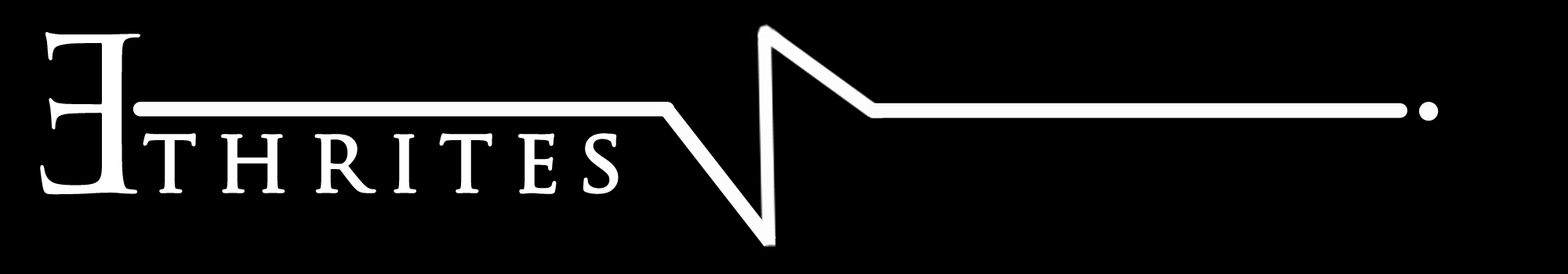
<style>
.page{position:relative;width:1568px;height:274px;background:#000000}
.page>*{position:absolute;margin:0}
.t1{font:248.3px "TrajanPro-Regular";letter-spacing:0.18em;color:#ffffff}
.t2{font:88.7px "TrajanPro-Regular";letter-spacing:0.18em;color:#ffffff;font-weight:bold}
</style>
<div class="page">
<p class="t1" style="left:40px;top:32px;width:100px;height:163px;rotate:180deg">e</p>
<p class="t2" style="left:143px;top:133px;width:476px;height:61px">thrites</p>
</div>
